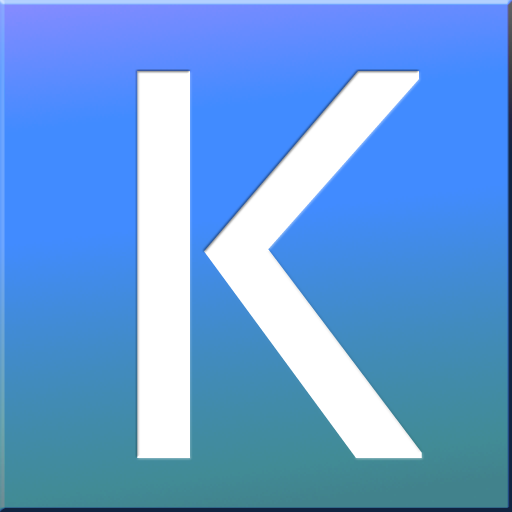
<style>
.page{position:relative;width:512px;height:512px}
.page>*{position:absolute;margin:0}
.t1{font:527.5px "BellGothicStd-Bold";letter-spacing:0.06em;color:#ffffff}
</style>
<div class="page">
<p class="t1" style="left:137px;top:71px;width:285px;height:387px">K</p>
</div>
